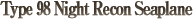
<style>
.page{position:relative;width:193px;height:19px;background:#ffffff}
.page>*{position:absolute;margin:0}
.t1{font:18px "RyuminPro-ExBold";letter-spacing:-0.095em;color:#4a3f32;font-weight:bold;scale:0.85 1}
</style>
<div class="page">
<p class="t1" style="left:0px;top:1px;width:193px;height:18px">Type 98 Night Recon Seaplane</p>
</div>
